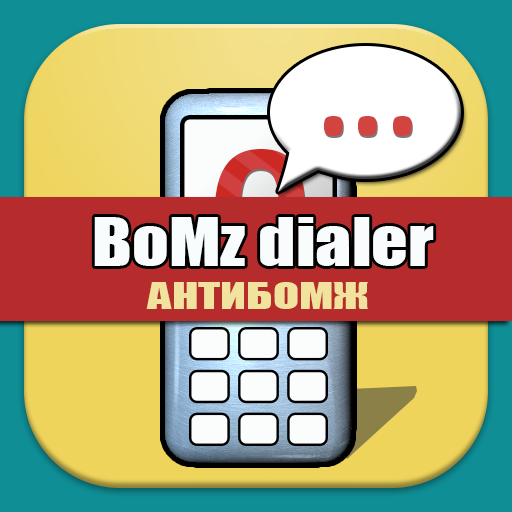
<style>
.page{position:relative;width:512px;height:512px}
.page>*{position:absolute;margin:0}
.t1{font:62.2px "Impact";color:#f9fcfd;scale:1.16 1}
.t2{font:33.9px "Impact";color:#f1e29e;scale:1.41 1}
</style>
<div class="page">
<p class="t1" style="left:94px;top:217px;width:340px;height:49px">BoMz dialer</p>
<p class="t2" style="left:146px;top:282px;width:222px;height:27px">АНТИБОМЖ</p>
</div>
